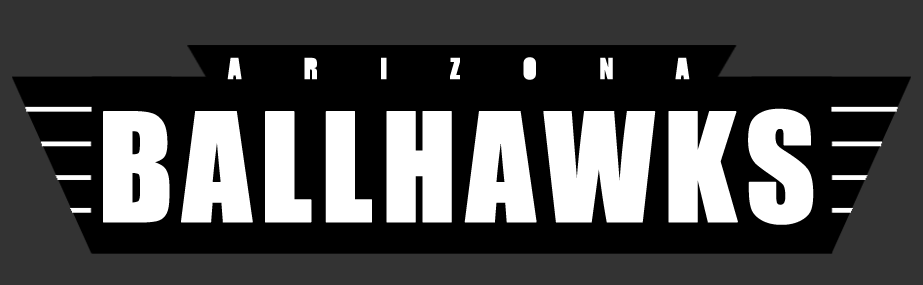
<style>
.page{position:relative;width:923px;height:285px;background:#000000}
.page>*{position:absolute;margin:0}
.t1{font:139.6px "Impact";letter-spacing:0.04em;color:#ffffff;font-weight:bold}
</style>
<div class="page">
<p class="t1" style="left:103px;top:108px;width:711px;height:117px">BALLHAWKS</p>
</div>
